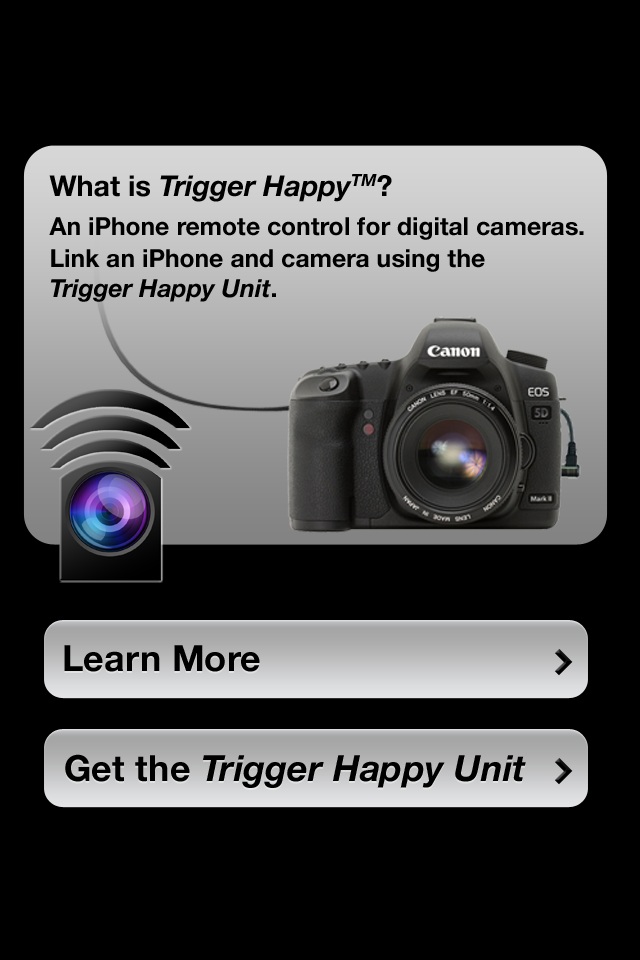
<style>
.page{position:relative;width:640px;height:960px;background:#000000}
.page>*{position:absolute;margin:0}
.t1{font:24.7px/38.7px "HelveticaNeue-Bold";color:#000000}
.t2{font:28.7px/37.7px "HelveticaNeue-Bold";color:#000000}
.t3{font:28.7px/37.7px "HelveticaNeue-BoldItalic";color:#000000}
.t4{font:24.7px/32.7px "HelveticaNeue-Bold";color:#000000}
.t5{font:24.7px/29.7px "HelveticaNeue-Bold";color:#000000}
.t6{font:24.7px/29.7px "HelveticaNeue-BoldItalic";color:#000000}
.t7{font:36px "HelveticaNeue-Bold";letter-spacing:0.005em;color:#000000}
.t8{font:36px "HelveticaNeue-BoldItalic";letter-spacing:0.005em;color:#000000}
</style>
<div class="page">
<p class="t1" style="left:49px;top:174px;width:535px;height:128px"><span class="t2">What is </span><span class="t3">Trigger HappyTM</span><span class="t2">?<br></span>An iPhone remote control for digital cameras.<br><span class="t4">Link an iPhone and camera using</span><span class="t5"> the<br></span><span class="t6">Trigger Happy Unit</span><span class="t5">.</span></p>
<p class="t7" style="left:64px;top:645px;width:196px;height:27px">Learn More</p>
<p class="t8" style="left:65px;top:754px;width:461px;height:34px"><span class="t7">Get the </span>Trigger Happy Unit</p>
</div>
